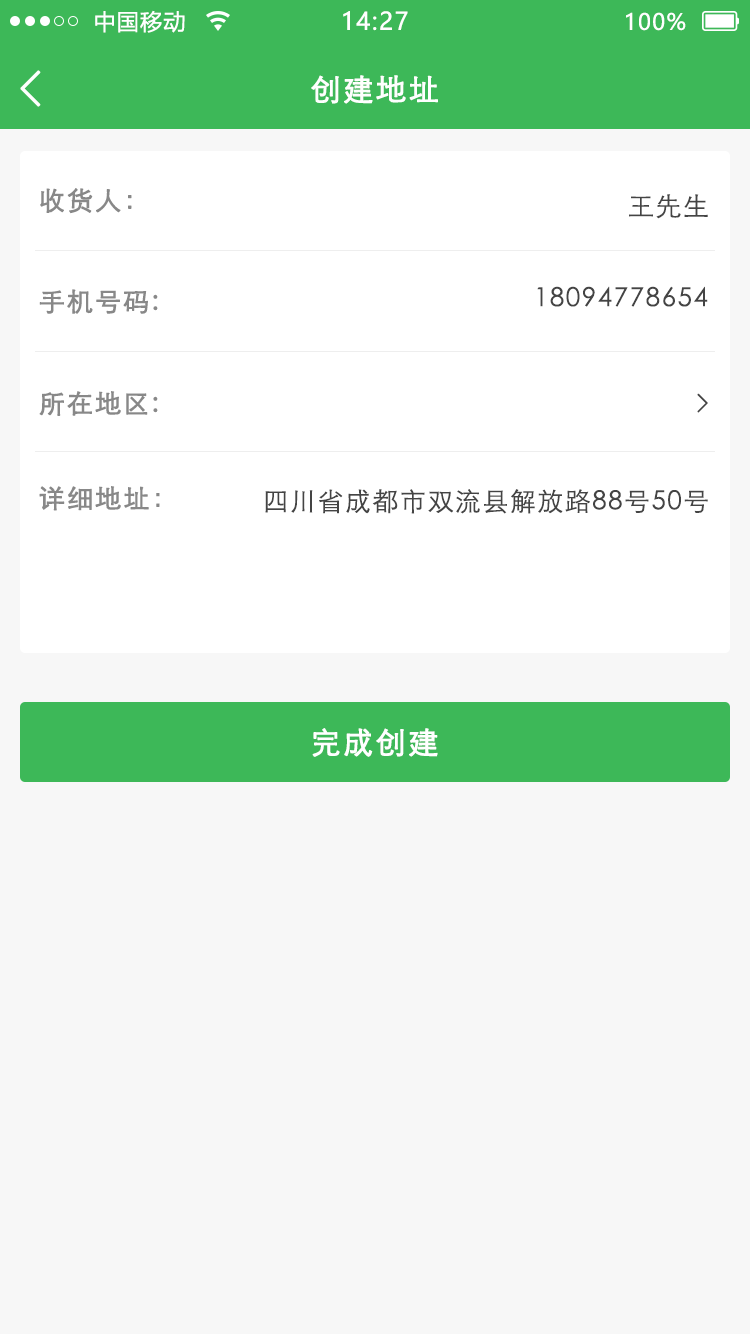
<style>
.page{position:relative;width:750px;height:1334px;background:#f7f7f7}
.page>*{position:absolute;margin:0}
.t1{font:22px "MicrosoftYaHei";letter-spacing:0.06em;color:#ffffff}
.t2{font:24px "MicrosoftYaHei";letter-spacing:0.06em;color:#ffffff}
.t3{font:49.8px "NSimSun";letter-spacing:0.06em;color:#fefffe;font-weight:bold}
.t4{font:30px "STXihei";letter-spacing:0.06em;color:#fefffe;font-weight:bold}
.t5{font:25.9px "STXihei";letter-spacing:0.06em;color:#888888;font-weight:bold}
.t6{font:26px "STXihei";letter-spacing:0.06em;color:#444444}
.t7{font:25.9px "NSimSun";letter-spacing:0.06em;color:#444444;font-weight:bold}
.t8{font:25.9px "STXihei";letter-spacing:0.06em;color:#444444}
.t9{font:30px "STXihei";letter-spacing:0.06em;color:#ffffff;font-weight:bold}
</style>
<div class="page">
<p class="t1" style="left:95px;top:10px;width:90px;height:23px">中国移动</p>
<p class="t2" style="left:343px;top:11px;width:65px;height:20px">14:27</p>
<p class="t1" style="left:626px;top:12px;width:60px;height:19px">100%</p>
<p class="t3" style="left:20px;top:70px;width:21px;height:37px">&lt;</p>
<p class="t4" style="left:311px;top:75px;width:127px;height:29px">创建地址</p>
<p class="t5" style="left:40px;top:188px;width:92px;height:26px">收货人：</p>
<p class="t6" style="left:629px;top:194px;width:79px;height:25px">王先生</p>
<p class="t5" style="left:39px;top:289px;width:119px;height:25px">手机号码:</p>
<p class="t6" style="left:537px;top:286px;width:171px;height:21px">18094778654</p>
<p class="t5" style="left:39px;top:391px;width:119px;height:25px">所在地区:</p>
<p class="t7" style="left:697px;top:393px;width:11px;height:20px">&gt;</p>
<p class="t5" style="left:39px;top:486px;width:121px;height:25px">详细地址：</p>
<p class="t8" style="left:265px;top:489px;width:443px;height:25px">四川省成都市双流县解放路88号50号</p>
<p class="t9" style="left:312px;top:728px;width:126px;height:29px">完成创建</p>
</div>
